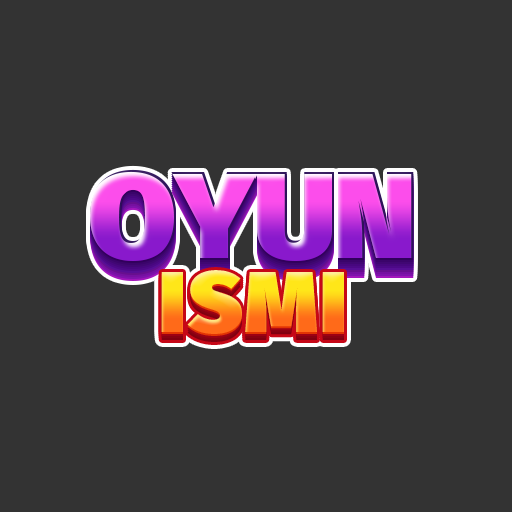
<style>
.page{position:relative;width:512px;height:512px;background:#333333}
.page>*{position:absolute;margin:0}
.t1{font:122.7px "FiraSans-Ultra";letter-spacing:-0.02em;scale:1.05 1}
.t2{font:87.1px "FiraSans-Ultra";letter-spacing:0.025em;scale:1.05 1}
</style>
<div class="page">
<p class="t1" style="left:90px;top:169px;width:324px;height:92px">OYUN</p>
<p class="t2" style="left:161px;top:270px;width:183px;height:64px">ISMI</p>
</div>
